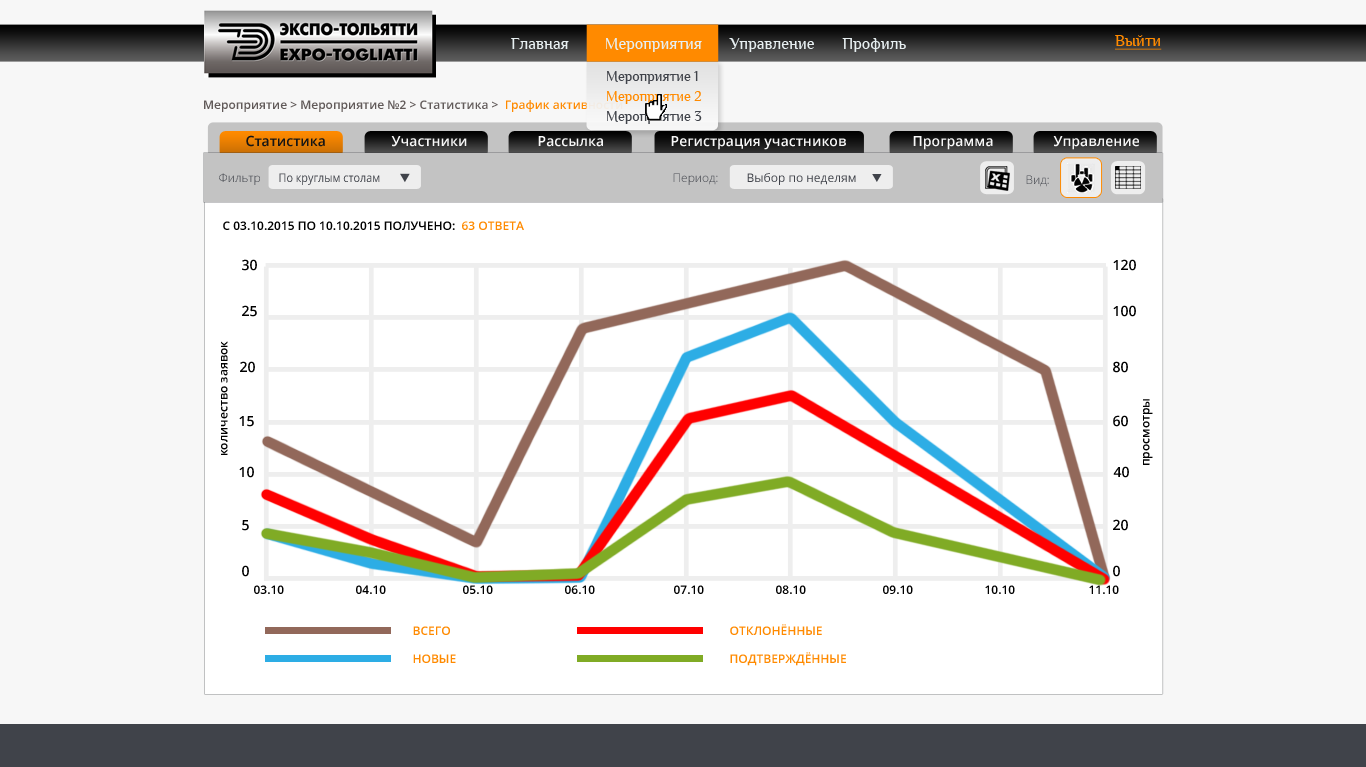
<style>
.page{position:relative;width:1366px;height:767px;background:#ffffff}
.page>*{position:absolute;margin:0}
.t1{font:16.5px "Philosopher";color:#e7eff1}
.t2{font:16px "Philosopher";color:#ff8a00;text-decoration:underline}
.t3{font:14.4px/20px "Philosopher";color:#40434a}
.t4{font:14.4px/20px "Philosopher";color:#ff8a00}
.t5{font:12px "OpenSans-Semibold";color:#615a59}
.t6{font:12px "OpenSans-Semibold";color:#ff8a00}
.t7{font:14px "OpenSans-Semibold";color:#151515}
.t8{font:14px "OpenSans-Semibold";color:#f7f7f7}
.t9{font:12px "OpenSans-Light"}
.t10{font:12px "OpenSans";color:#40434a;scale:0.9 1}
.t11{font:12px "OpenSans";color:#40434a}
.t12{font:12px "OpenSans-Semibold";color:#000000;text-transform:uppercase}
.t13{font:12px "OpenSans-Semibold";color:#ff8a00;text-transform:uppercase}
.t14{font:14px "OpenSans-Semibold";color:#000000}
.t15{font:12px "OpenSans-Semibold";color:#000000}
</style>
<div class="page">
<p class="t1" style="left:511px;top:38px;width:395px;height:14px">Главная         Мероприятия       Управление       Профиль</p>
<p class="t2" style="left:1115px;top:35px;width:47px;height:15px">Выйти</p>
<p class="t3" style="left:607px;top:71px;width:95px;height:53px">Мероприятие 1<br><span class="t4">Мероприятие 2<br></span>Мероприятие 3</p>
<p class="t5" style="left:204px;top:100px;width:419px;height:12px">Мероприятие &gt; Мероприятие №2 &gt; Статистика &gt;  <span class="t6">График активности</span></p>
<p class="t7" style="left:246px;top:135px;width:79px;height:12px">Статистика</p>
<p class="t8" style="left:391px;top:136px;width:76px;height:11px">Участники</p>
<p class="t8" style="left:538px;top:136px;width:65px;height:11px">Рассылка</p>
<p class="t8" style="left:671px;top:136px;width:175px;height:14px">Регистрация участников</p>
<p class="t8" style="left:913px;top:136px;width:80px;height:14px">Программа</p>
<p class="t8" style="left:1053px;top:136px;width:86px;height:14px">Управление</p>
<p class="t9" style="left:219px;top:173px;width:41px;height:12px">Фильтр</p>
<p class="t10" style="left:279px;top:173px;width:101px;height:12px">По круглым столам</p>
<p class="t9" style="left:673px;top:173px;width:45px;height:12px">Период:</p>
<p class="t11" style="left:747px;top:173px;width:109px;height:12px">Выбор по неделям</p>
<p class="t9" style="left:1026px;top:175px;width:23px;height:12px">Вид:</p>
<p class="t12" style="left:223px;top:221px;width:301px;height:9px">с 03.10.2015 по 10.10.2015 получено:  <span class="t13">63 ответа</span></p>
<p class="t14" style="left:242px;top:259px;width:15px;height:12px">30</p>
<p class="t14" style="left:1113px;top:259px;width:23px;height:12px">120</p>
<p class="t14" style="left:242px;top:305px;width:15px;height:12px">25</p>
<p class="t14" style="left:1113px;top:305px;width:23px;height:12px">100</p>
<p class="t15" style="left:221px;top:341px;width:7px;height:114px;rotate:-90deg">количество заявок</p>
<p class="t14" style="left:240px;top:361px;width:15px;height:12px">20</p>
<p class="t14" style="left:1113px;top:361px;width:15px;height:12px">80</p>
<p class="t15" style="left:1143px;top:399px;width:10px;height:66px;rotate:-90deg">просмотры</p>
<p class="t14" style="left:239px;top:416px;width:15px;height:11px">15</p>
<p class="t14" style="left:1113px;top:415px;width:15px;height:12px">60</p>
<p class="t14" style="left:239px;top:466px;width:15px;height:12px">10</p>
<p class="t14" style="left:1113px;top:466px;width:16px;height:12px">40</p>
<p class="t14" style="left:242px;top:520px;width:7px;height:11px">5</p>
<p class="t14" style="left:1113px;top:519px;width:15px;height:12px">20</p>
<p class="t14" style="left:242px;top:565px;width:7px;height:12px">0</p>
<p class="t14" style="left:1113px;top:565px;width:7px;height:12px">0</p>
<p class="t15" style="left:254px;top:585px;width:30px;height:9px">03.10</p>
<p class="t15" style="left:356px;top:585px;width:30px;height:9px">04.10</p>
<p class="t15" style="left:463px;top:585px;width:30px;height:9px">05.10</p>
<p class="t15" style="left:565px;top:585px;width:30px;height:9px">06.10</p>
<p class="t15" style="left:674px;top:585px;width:30px;height:9px">07.10</p>
<p class="t15" style="left:776px;top:585px;width:30px;height:9px">08.10</p>
<p class="t15" style="left:883px;top:585px;width:30px;height:9px">09.10</p>
<p class="t15" style="left:985px;top:585px;width:30px;height:9px">10.10</p>
<p class="t15" style="left:1089px;top:585px;width:30px;height:9px">11.10</p>
<p class="t13" style="left:413px;top:626px;width:37px;height:9px">ВСЕГО</p>
<p class="t13" style="left:730px;top:624px;width:92px;height:11px">отклонённые</p>
<p class="t13" style="left:413px;top:654px;width:43px;height:9px">новые</p>
<p class="t13" style="left:730px;top:652px;width:116px;height:14px">подтверждённые</p>
</div>
